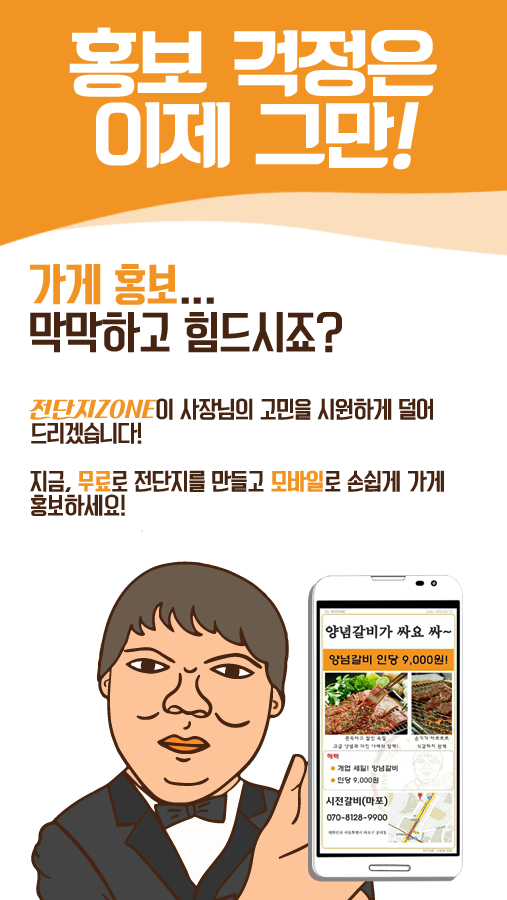
<style>
.page{position:relative;width:507px;height:900px;background:#ffffff}
.page>*{position:absolute;margin:0}
.t1{font:72px/72px "KoreanBLACK-B";letter-spacing:-0.05em;color:#ffffff}
.t2{font:72px/72px "KoreanBLACK-B";letter-spacing:-0.05em;color:#ffffff;font-style:italic}
.t3{font:42px/48px "KoreanYNMYT-M";letter-spacing:-0.05em;color:#462412}
.t4{font:42px/48px "KoreanYNMYT-B";letter-spacing:-0.05em;color:#f29423}
.t5{font:22px/24px "KoreanYNMYT-M";letter-spacing:-0.05em;color:#462412}
.t6{font:22px/24px "KoreanPDSR-R";color:#f29423}
.t7{font:22px/24px "KoreanYNMYT-B";letter-spacing:-0.05em;color:#f29423}
</style>
<div class="page">
<p class="t1" style="left:69px;top:27px;width:368px;height:143px;text-align:center">홍보 걱정은<br>이제 그만<span class="t2">!</span></p>
<p class="t3" style="left:30px;top:264px;width:312px;height:89px"><span class="t4">가게 홍보</span>...<br>막막하고 힘드시죠?</p>
<p class="t5" style="left:29px;top:398px;width:415px;height:118px"><span class="t6">전단지ZONE</span>이 사장님의 고민을 시원하게 덜어<br>드리겠습니다!<br><br>지금, <span class="t7">무료</span>로 전단지를 만들고 <span class="t7">모바일</span>로 손쉽게 가게 <br>홍보하세요!</p>
</div>
